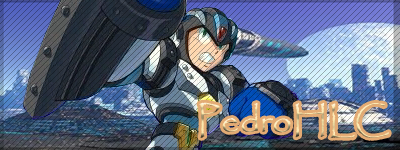
<style>
.page{position:relative;width:400px;height:150px}
.page>*{position:absolute;margin:0}
.t1{font:35.9px "Papyrus-Regular"}
</style>
<div class="page">
<p class="t1" style="left:199px;top:102px;width:190px;height:36px">PedroHLC</p>
</div>
